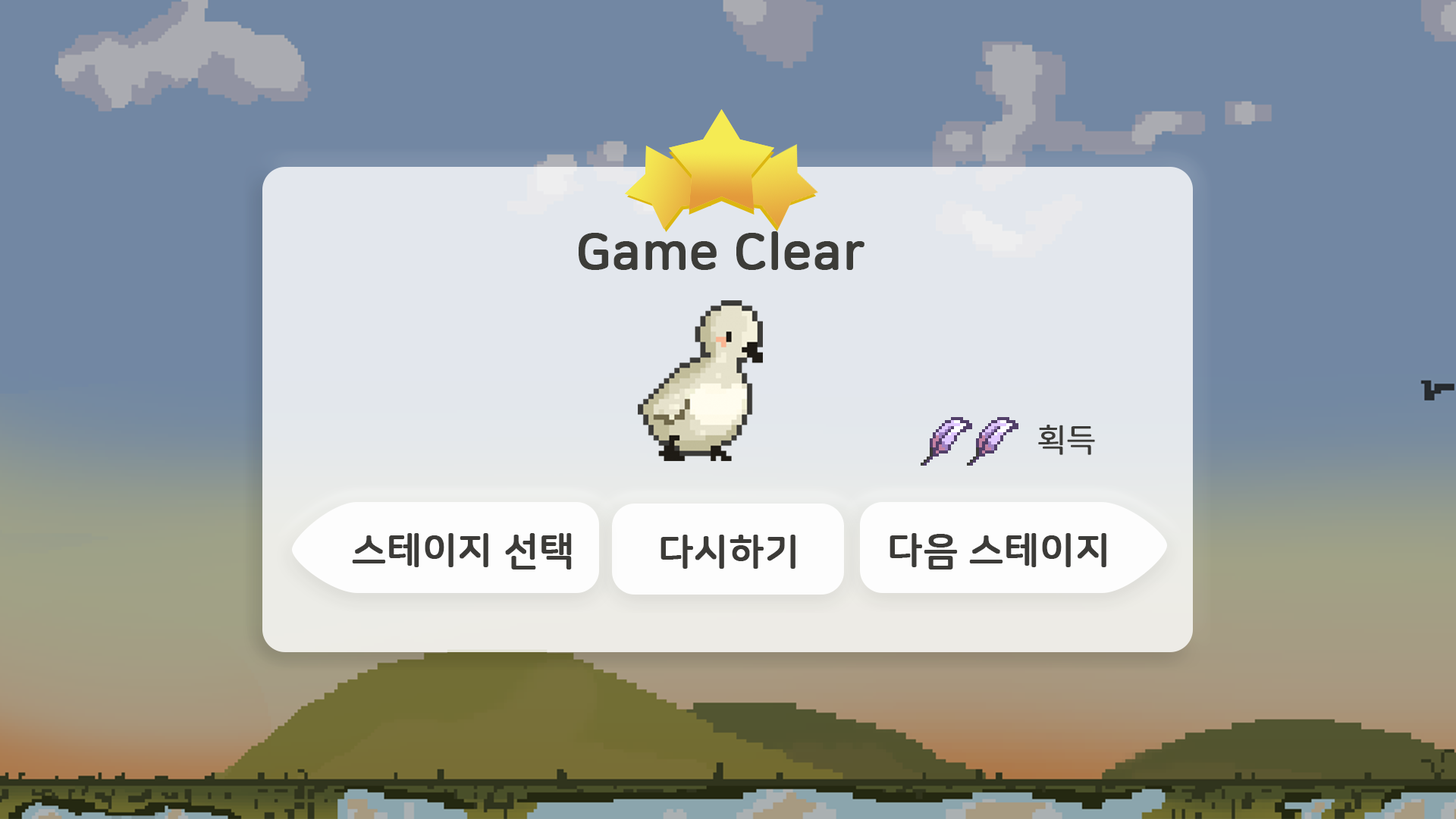
<style>
.page{position:relative;width:1456px;height:819px;background:#7287a3}
.page>*{position:absolute;margin:0}
.t1{font:50.6px "NanumSquareRoundB";color:#3c3c38;font-weight:bold}
.t2{font:31.6px "NanumSquareRoundR";color:#3c3b38;font-weight:bold}
.t3{font:37.9px "NanumSquareRoundB";color:#3c3b38;font-weight:bold}
</style>
<div class="page">
<p class="t1" style="left:579px;top:231px;width:285px;height:39px">Game Clear</p>
<p class="t2" style="left:1038px;top:425px;width:57px;height:30px">획득</p>
<p class="t3" style="left:352px;top:533px;width:220px;height:37px">스테이지 선택</p>
<p class="t3" style="left:890px;top:533px;width:216px;height:37px">다음 스테이지</p>
<p class="t3" style="left:660px;top:535px;width:135px;height:34px">다시하기</p>
</div>
